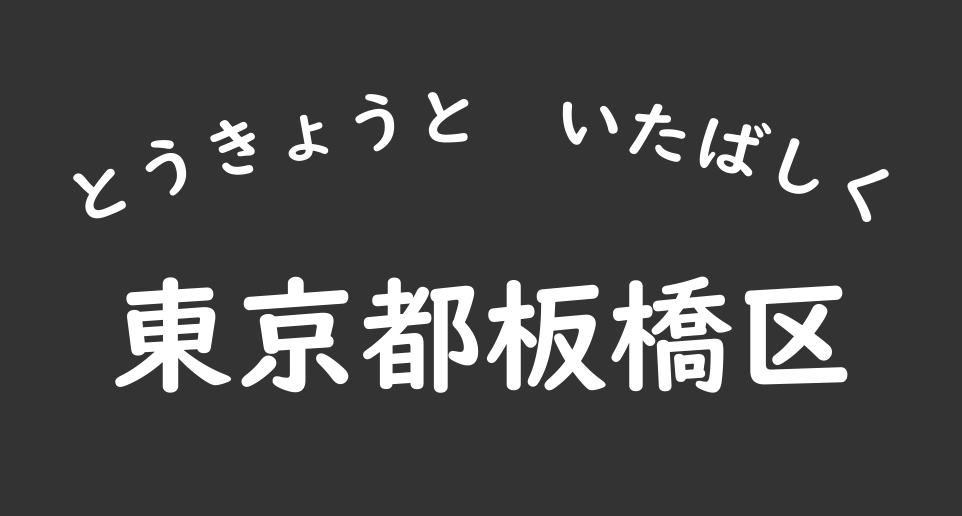
<style>
.page{position:relative;width:962px;height:516px;background:#333333}
.page>*{position:absolute;margin:0}
.t1{font:66.7px "UDDigiKyokashoNP-B";color:#ffffff}
.t2{font:125px "UDDigiKyokashoNP-B";color:#ffffff}
</style>
<div class="page">
<p class="t1" style="left:73px;top:92px;width:816px;height:130px">とうきょうと　いたばしく</p>
<p class="t2" style="left:115px;top:276px;width:733px;height:117px">東京都板橋区</p>
</div>
